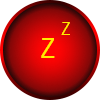
<style>
.page{position:relative;width:100px;height:100px;background:#ffffff}
.page>*{position:absolute;margin:0}
.t1{font:18px "ArialNarrow";color:#ffea00}
.t2{font:28px "ArialNarrow";color:#ffea00}
</style>
<div class="page">
<p class="t1" style="left:61px;top:22px;width:9px;height:13px">Z</p>
<p class="t2" style="left:41px;top:38px;width:14px;height:20px">Z</p>
</div>
